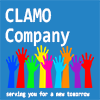
<style>
.page{position:relative;width:100px;height:100px;background:#2483c5}
.page>*{position:absolute;margin:0}
.t1{font:21px "Consolas-Bold";color:#ffffff;scale:0.8 1}
.t2{font:6.3px "Consolas-Bold";color:#ffffff;scale:0.8 1}
</style>
<div class="page">
<p class="t1" style="left:5px;top:8px;width:65px;height:39px">CLAMO<br>Company</p>
<p class="t2" style="left:6px;top:91px;width:84px;height:7px">serving you for a new tomorrow</p>
</div>
